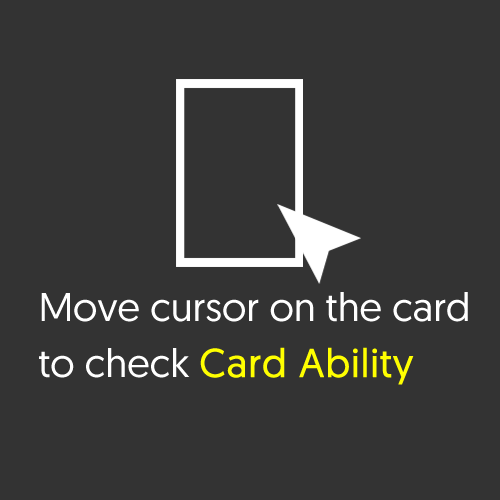
<style>
.page{position:relative;width:500px;height:500px;background:#333333}
.page>*{position:absolute;margin:0}
.t1{font:40px/56px "Geomanist-Regular";color:#ffffff}
.t2{font:40px/56px "Geomanist-Regular";color:#ffff00;font-weight:bold}
</style>
<div class="page">
<p class="t1" style="left:39px;top:292px;width:429px;height:93px">Move cursor on the card <br>to check <span class="t2">Card Ability</span></p>
</div>
